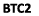
<style>
.page{position:relative;width:39px;height:16px;background:#ffffff}
.page>*{position:absolute;margin:0}
.t1{font:14px "Calibri-Bold";color:#000000}
</style>
<div class="page">
<p class="t1" style="left:3px;top:3px;width:28px;height:10px">BTC2</p>
</div>
